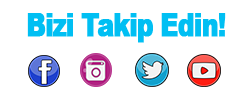
<style>
.page{position:relative;width:250px;height:100px;background:#ffffff}
.page>*{position:absolute;margin:0}
.t1{font:32px "Arial-Black";letter-spacing:-0.06em;color:#00bff3;font-weight:bold;scale:0.79 1}
</style>
<div class="page">
<p class="t1" style="left:27px;top:13px;width:199px;height:30px">Bizi Takip Edin!</p>
</div>
